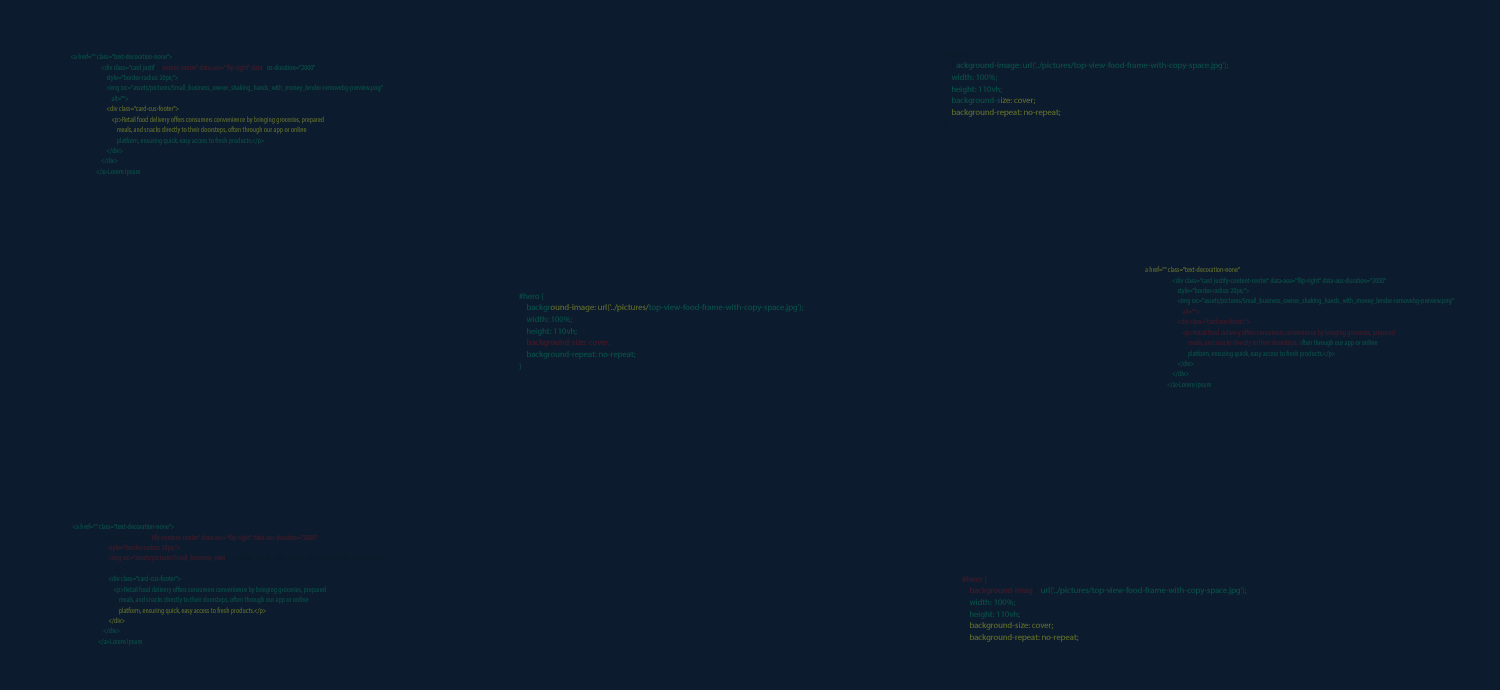
<style>
.page{position:relative;width:1500px;height:690px;background:#0c1c2e}
.page>*{position:absolute;margin:0}
.t1{font:7.5px/10.4px "MyriadPro-Regular";letter-spacing:0.01em;scale:0.77 1}
.t2{font:8.3px/11.6px "MyriadPro-Regular";letter-spacing:0.01em}
</style>
<div class="page">
<p class="t1" style="left:70px;top:53px;width:313px;height:123px">&lt;a href="" class="text-decoration-none"&gt;<br>                        &lt;div class="card justify-content-center" data-aos="flip-right" data-aos-duration="2000"<br>                            style="border-radius: 20px;"&gt;<br>                            &lt;img src="assets/pictures/Small_business_owner_shaking_hands_with_money_lender-removebg-preview.png"<br>                                alt=""&gt;<br>                            &lt;div class="card-cus-footer"&gt;<br>                                &lt;p&gt;Retail food delivery offers consumers convenience by bringing groceries, prepared<br>                                    meals, and snacks directly to their doorsteps, often through our app or online<br>                                    platform, ensuring quick, easy access to fresh products.&lt;/p&gt;<br>                            &lt;/div&gt;<br>                        &lt;/div&gt;<br>                    &lt;/a&gt;Lorem Ipsum</p>
<p class="t2" style="left:944px;top:51px;width:285px;height:77px">#hero {<br>    background-image: url('../pictures/top-view-food-frame-with-copy-space.jpg');<br>    width: 100%;<br>    height: 110vh;<br>    background-size: cover;<br>    background-repeat: no-repeat;<br>}</p>
<p class="t1" style="left:1141px;top:266px;width:313px;height:123px">&lt;a href="" class="text-decoration-none"&gt;<br>                        &lt;div class="card justify-content-center" data-aos="flip-right" data-aos-duration="2000"<br>                            style="border-radius: 20px;"&gt;<br>                            &lt;img src="assets/pictures/Small_business_owner_shaking_hands_with_money_lender-removebg-preview.png"<br>                                alt=""&gt;<br>                            &lt;div class="card-cus-footer"&gt;<br>                                &lt;p&gt;Retail food delivery offers consumers convenience by bringing groceries, prepared<br>                                    meals, and snacks directly to their doorsteps, often through our app or online<br>                                    platform, ensuring quick, easy access to fresh products.&lt;/p&gt;<br>                            &lt;/div&gt;<br>                        &lt;/div&gt;<br>                    &lt;/a&gt;Lorem Ipsum</p>
<p class="t2" style="left:519px;top:293px;width:285px;height:77px">#hero {<br>    background-image: url('../pictures/top-view-food-frame-with-copy-space.jpg');<br>    width: 100%;<br>    height: 110vh;<br>    background-size: cover;<br>    background-repeat: no-repeat;<br>}</p>
<p class="t1" style="left:72px;top:523px;width:313px;height:123px">&lt;a href="" class="text-decoration-none"&gt;<br>                        &lt;div class="card justify-content-center" data-aos="flip-right" data-aos-duration="2000"<br>                            style="border-radius: 20px;"&gt;<br>                            &lt;img src="assets/pictures/Small_business_owner_shaking_hands_with_money_lender-removebg-preview.png"<br>                                alt=""&gt;<br>                            &lt;div class="card-cus-footer"&gt;<br>                                &lt;p&gt;Retail food delivery offers consumers convenience by bringing groceries, prepared<br>                                    meals, and snacks directly to their doorsteps, often through our app or online<br>                                    platform, ensuring quick, easy access to fresh products.&lt;/p&gt;<br>                            &lt;/div&gt;<br>                        &lt;/div&gt;<br>                    &lt;/a&gt;Lorem Ipsum</p>
<p class="t2" style="left:962px;top:576px;width:285px;height:77px">#hero {<br>    background-image: url('../pictures/top-view-food-frame-with-copy-space.jpg');<br>    width: 100%;<br>    height: 110vh;<br>    background-size: cover;<br>    background-repeat: no-repeat;<br>}</p>
</div>
